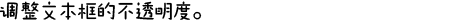
<style>
.page{position:relative;width:454px;height:21px;background:#ffffff}
.page>*{position:absolute;margin:0}
.t1{font:22px "¢è?";color:#000000}
</style>
<div class="page">
<p class="t1" style="left:0px;top:1px;width:202px;height:19px">调整文本框的不透明度。</p>
</div>
